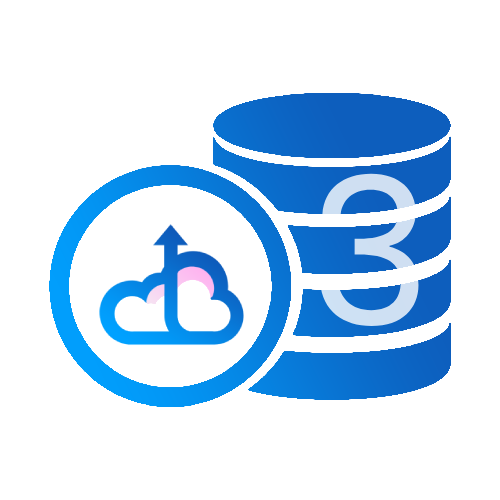
<style>
.page{position:relative;width:500px;height:500px;background:#ffffff}
.page>*{position:absolute;margin:0}
.t1{font:205.3px "Poppins-Regular";color:#cfdff2}
</style>
<div class="page">
<p class="t1" style="left:320px;top:173px;width:99px;height:153px">3</p>
</div>
